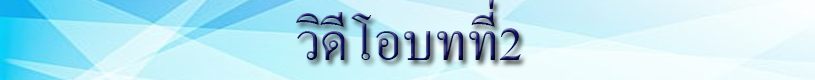
<style>
.page{position:relative;width:815px;height:80px}
.page>*{position:absolute;margin:0}
.t1{font:72px "AngsanaNew"}
</style>
<div class="page">
<p class="t1" style="left:296px;top:0px;width:225px;height:60px">วิดีโอบทที่2</p>
</div>
